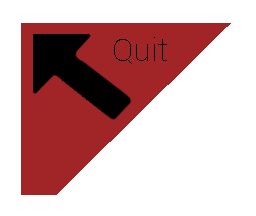
<style>
.page{position:relative;width:256px;height:216px;background:#ffffff}
.page>*{position:absolute;margin:0}
.t1{font:32px "Roboto-Thin";color:#000000}
</style>
<div class="page">
<p class="t1" style="left:114px;top:37px;width:53px;height:27px">Quit</p>
</div>
